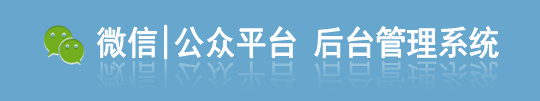
<style>
.page{position:relative;width:540px;height:101px;background:#67a7cd}
.page>*{position:absolute;margin:0}
.t1{font:33.9px "SimHei";color:#ffffff;scale:0.91 1}
.t2{font:33.9px "SimHei";color:#76b0d2;scale:0.91 1}
</style>
<div class="page">
<p class="t1" style="left:97px;top:25px;width:402px;height:34px">微信|公众平台 后台管理系统</p>
<p class="t2" style="left:97px;top:60px;width:402px;height:34px">微信|公众平台 后台管理系统</p>
</div>
